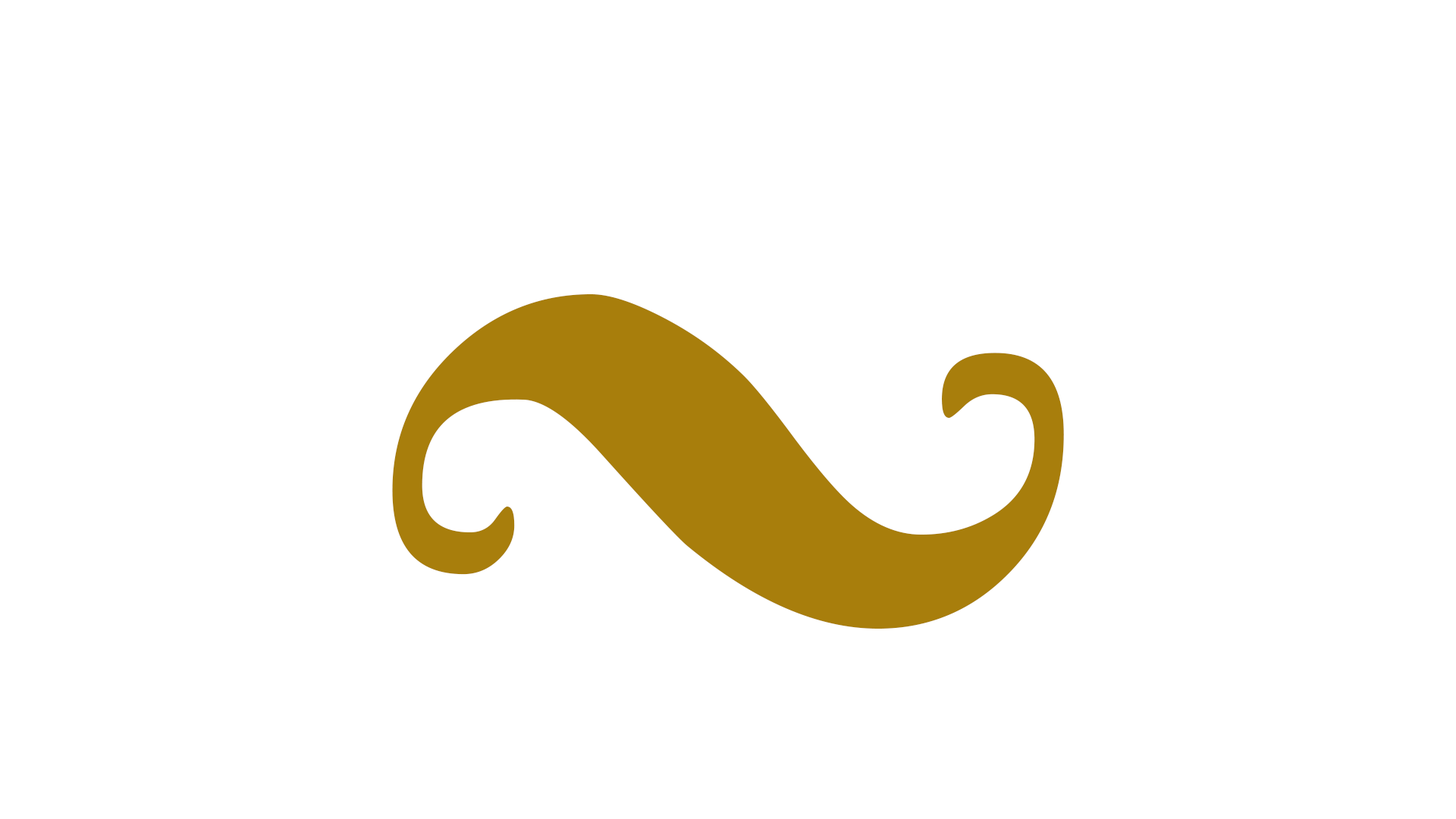
<style>
.page{position:relative;width:1456px;height:819px;background:#ffffff}
.page>*{position:absolute;margin:0}
.t1{font:982.8px "GoudyStout";color:#a87e0c}
</style>
<div class="page">
<p class="t1" style="left:392px;top:294px;width:672px;height:335px">~</p>
</div>
